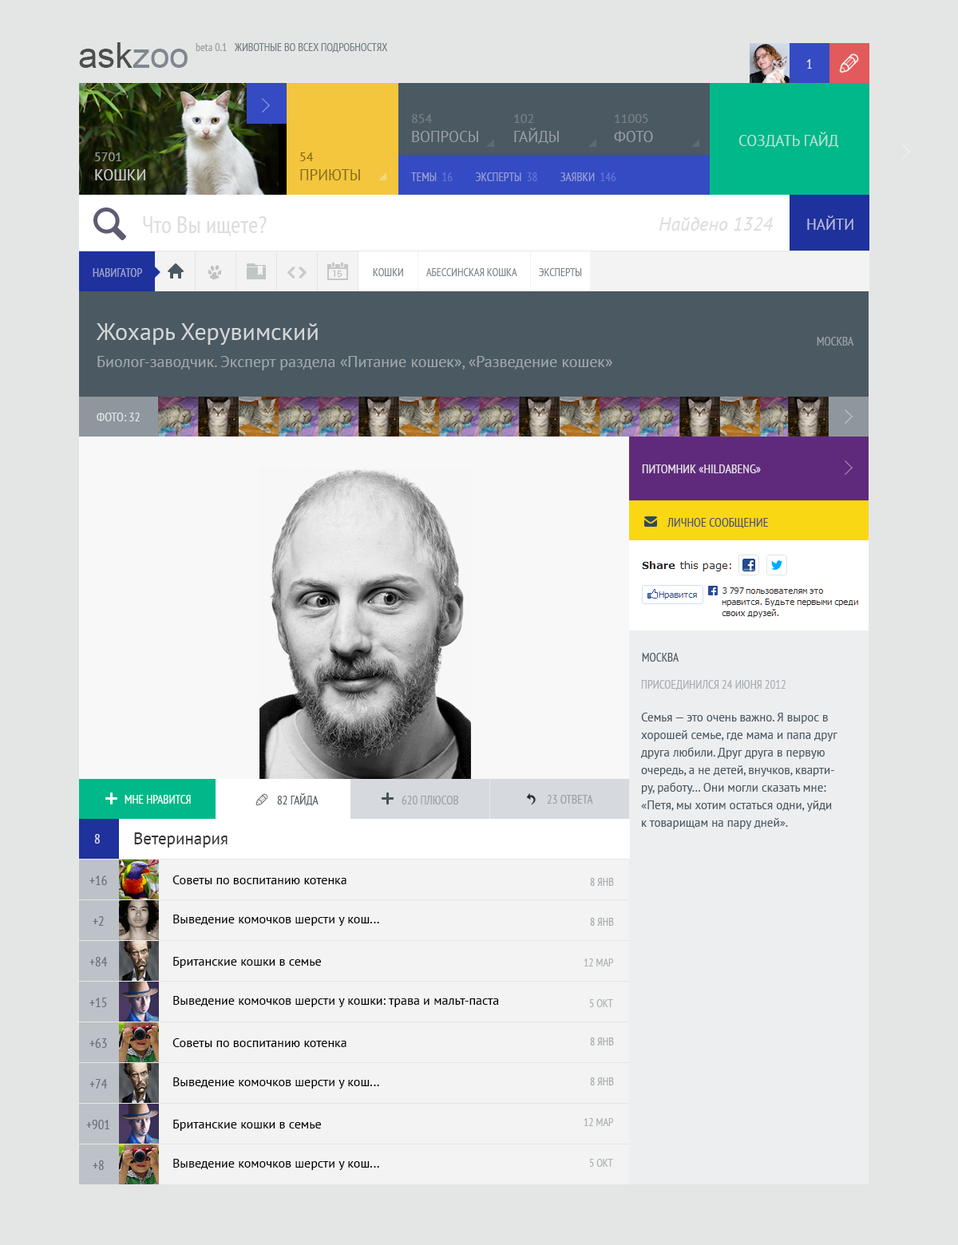
<style>
.page{position:relative;width:958px;height:1245px;background:#e4e6e5}
.page>*{position:absolute;margin:0}
.t1{font:12px "PTSans-Narrow";color:#9ea3cd;text-transform:uppercase}
.t2{font:11.2px "PTSans-Narrow";color:#7b848a;text-transform:uppercase}
.t3{font:23.9px "PTSans-Regular";color:#d4d6d8}
.t4{font:12px "PTSans-Narrow";color:#9ba2a5;text-transform:uppercase}
.t5{font:16px "PTSans-Regular";color:#a2a8ac}
.t6{font:12.8px "PTSans-Narrow";color:#e1e3e5;text-transform:uppercase}
.t7{font:12.8px "PTSans-Narrow";color:#e5e0e9;text-transform:uppercase}
.t8{font:12.8px "PTSans-Narrow";color:#4b5962;text-transform:uppercase}
.t9{font:12px "PTSans-Narrow";color:#4b5962;text-transform:uppercase}
.t10{font:12px "PTSans-Narrow";color:#a8adb2;text-transform:uppercase}
.t11{font:12px/17.6px "PTSans-Regular";color:#4b5962}
.t12{font:12px "PTSans-Narrow";color:#ffffff;text-transform:uppercase}
.t13{font:12px "PTSans-Narrow";color:#9aa1a6;text-transform:uppercase}
.t14{font:16.8px "PTSans-Regular";color:#343434}
.t15{font:13.6px "PTSans-Narrow";color:#dfe0ed}
.t16{font:13.6px "PTSans-Narrow";color:#67727a}
.t17{font:12.8px "PTSans-Regular";color:#000000}
.t18{font:11.2px "PTSans-Narrow";color:#a4a9ac;text-transform:uppercase}
.t19{font:11.2px "PTSans-Narrow";color:#abb0b3;text-transform:uppercase}
</style>
<div class="page">
<p class="t1" style="left:93px;top:268px;width:49px;height:9px">навигатор</p>
<p class="t2" style="left:373px;top:268px;width:30px;height:8px">кошки</p>
<p class="t2" style="left:425px;top:268px;width:92px;height:8px">абессинская кошка</p>
<p class="t2" style="left:539px;top:268px;width:43px;height:8px">эксперты</p>
<p class="t3" style="left:97px;top:323px;width:221px;height:22px">Жохарь Херувимский</p>
<p class="t4" style="left:816px;top:337px;width:38px;height:9px">москва</p>
<p class="t5" style="left:97px;top:356px;width:515px;height:14px">Биолог-заводчик. Эксперт раздела «Питание кошек», «Разведение кошек»</p>
<p class="t6" style="left:97px;top:413px;width:43px;height:8px">Фото: 32</p>
<p class="t7" style="left:642px;top:465px;width:119px;height:8px">Питомник «HildaBeng»</p>
<p class="t8" style="left:666px;top:518px;width:102px;height:10px">личное сообщение</p>
<p class="t9" style="left:642px;top:653px;width:37px;height:9px">москва</p>
<p class="t10" style="left:641px;top:680px;width:144px;height:10px">присоединился 24 июня 2012</p>
<p class="t11" style="left:641px;top:713px;width:196px;height:116px">Семья — это очень важно. Я вырос в хорошей семье, где мама и папа друг друга любили. Друг друга в первую очередь, а не детей, внучков, квартиру, работу… Они могли сказать мне: «Петя, мы хотим остаться одни, уйди к товарищам на пару дней».</p>
<p class="t12" style="left:125px;top:795px;width:66px;height:9px">мне нравится</p>
<p class="t9" style="left:277px;top:793px;width:41px;height:13px">82 гайда</p>
<p class="t13" style="left:401px;top:796px;width:58px;height:8px">620 плюсов</p>
<p class="t13" style="left:547px;top:795px;width:46px;height:9px">23 ответа</p>
<p class="t14" style="left:134px;top:832px;width:93px;height:16px">Ветеринария</p>
<p class="t15" style="left:94px;top:834px;width:6px;height:10px">8</p>
<p class="t16" style="left:89px;top:876px;width:18px;height:9px">+16</p>
<p class="t17" style="left:172px;top:876px;width:174px;height:8px">Советы по воспитанию котенка</p>
<p class="t18" style="left:590px;top:878px;width:24px;height:8px">8 янв</p>
<p class="t16" style="left:93px;top:916px;width:11px;height:10px">+2</p>
<p class="t17" style="left:173px;top:915px;width:206px;height:11px">Выведение комочков шерсти у кош...</p>
<p class="t18" style="left:590px;top:918px;width:24px;height:8px">8 янв</p>
<p class="t16" style="left:89px;top:957px;width:19px;height:10px">+84</p>
<p class="t17" style="left:173px;top:957px;width:148px;height:11px">Британские кошки в семье</p>
<p class="t19" style="left:583px;top:959px;width:31px;height:8px">12 мар</p>
<p class="t16" style="left:89px;top:998px;width:18px;height:9px">+15</p>
<p class="t17" style="left:173px;top:996px;width:326px;height:11px">Выведение комочков шерсти у кошки: трава и мальт-паста</p>
<p class="t19" style="left:589px;top:999px;width:24px;height:8px">5 окт</p>
<p class="t18" style="left:590px;top:1038px;width:24px;height:8px">8 янв</p>
<p class="t16" style="left:89px;top:1038px;width:18px;height:10px">+63</p>
<p class="t17" style="left:172px;top:1038px;width:174px;height:9px">Советы по воспитанию котенка</p>
<p class="t16" style="left:89px;top:1079px;width:19px;height:10px">+74</p>
<p class="t17" style="left:173px;top:1077px;width:206px;height:12px">Выведение комочков шерсти у кош...</p>
<p class="t18" style="left:590px;top:1077px;width:24px;height:8px">8 янв</p>
<p class="t16" style="left:86px;top:1120px;width:23px;height:9px">+901</p>
<p class="t17" style="left:173px;top:1120px;width:148px;height:11px">Британские кошки в семье</p>
<p class="t19" style="left:583px;top:1118px;width:31px;height:8px">12 мар</p>
<p class="t16" style="left:93px;top:1160px;width:11px;height:10px">+8</p>
<p class="t17" style="left:173px;top:1159px;width:206px;height:11px">Выведение комочков шерсти у кош...</p>
<p class="t19" style="left:589px;top:1159px;width:24px;height:8px">5 окт</p>
</div>
